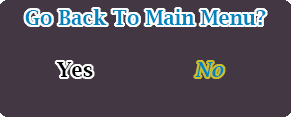
<style>
.page{position:relative;width:291px;height:117px;background:#423742}
.page>*{position:absolute;margin:0}
.t1{font:20px "LucidaBright-Demi";color:#0084bf}
.t2{font:20px "LucidaBright-Demi";color:#000000}
.t3{font:20px "LucidaBright-DemiItalic";color:#0084bf}
</style>
<div class="page">
<p class="t1" style="left:25px;top:9px;width:241px;height:16px">Go Back To Main Menu?</p>
<p class="t2" style="left:56px;top:62px;width:37px;height:15px">Yes</p>
<p class="t3" style="left:195px;top:62px;width:29px;height:15px">No</p>
</div>
